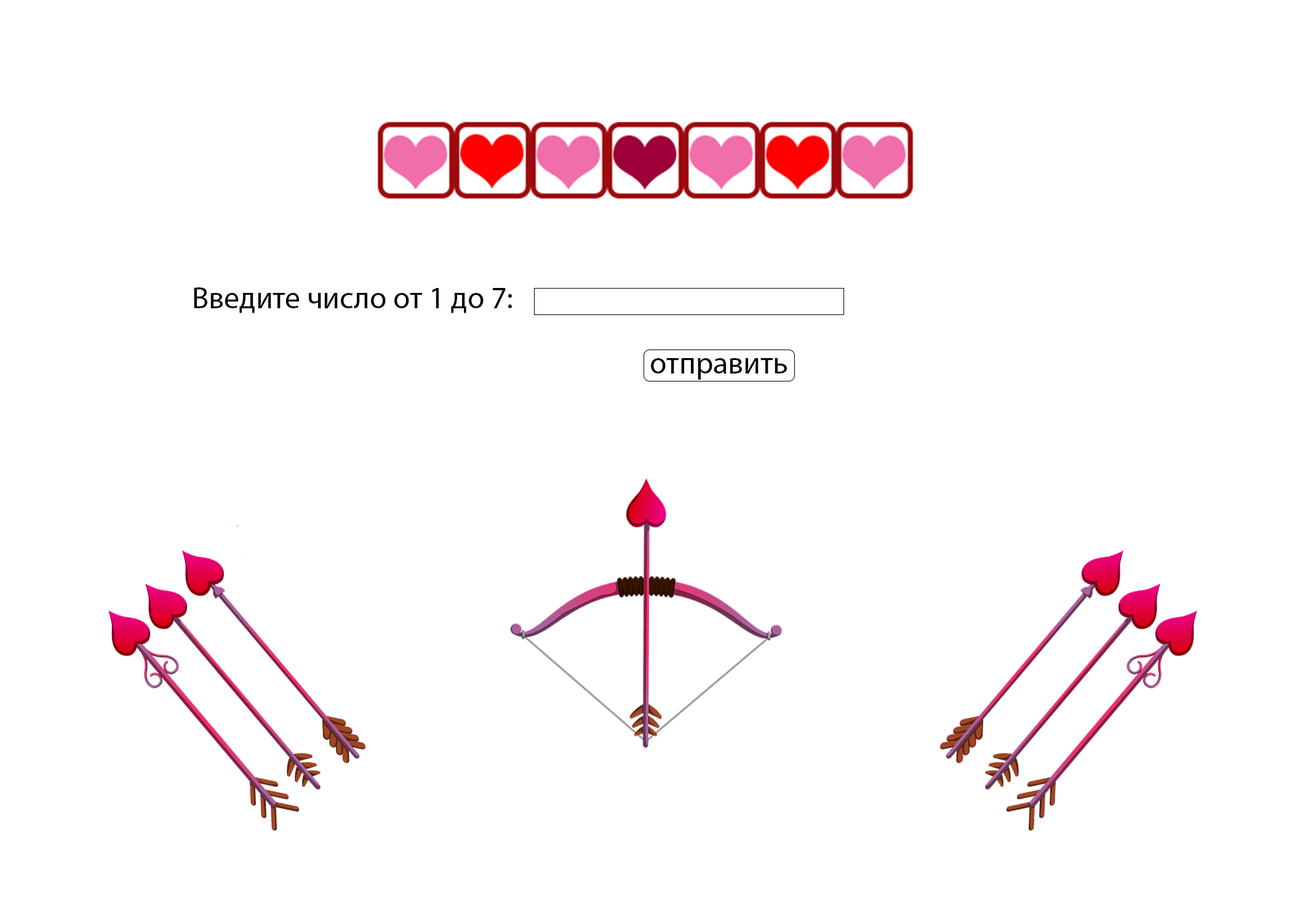
<style>
.page{position:relative;width:1292px;height:923px;background:#ffffff}
.page>*{position:absolute;margin:0}
.t1{font:30.8px "MyriadPro-Regular";color:#000000}
</style>
<div class="page">
<p class="t1" style="left:194px;top:287px;width:318px;height:26px">Введите число от 1 до 7:</p>
<p class="t1" style="left:651px;top:358px;width:136px;height:22px">отправить</p>
</div>
